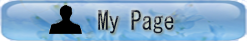
<style>
.page{position:relative;width:247px;height:41px}
.page>*{position:absolute;margin:0}
.t1{font:26.1px "MS-Gothic";scale:0.84 1}
</style>
<div class="page">
<p class="t1" style="left:98px;top:9px;width:76px;height:25px">My Page</p>
</div>
